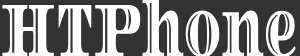
<style>
.page{position:relative;width:300px;height:56px;background:#333333}
.page>*{position:absolute;margin:0}
.t1{font:78.3px "Diplomata-Regular";color:#ffffff;scale:0.42 1}
</style>
<div class="page">
<p class="t1" style="left:2px;top:0px;width:294px;height:58px">HTPhone</p>
</div>
